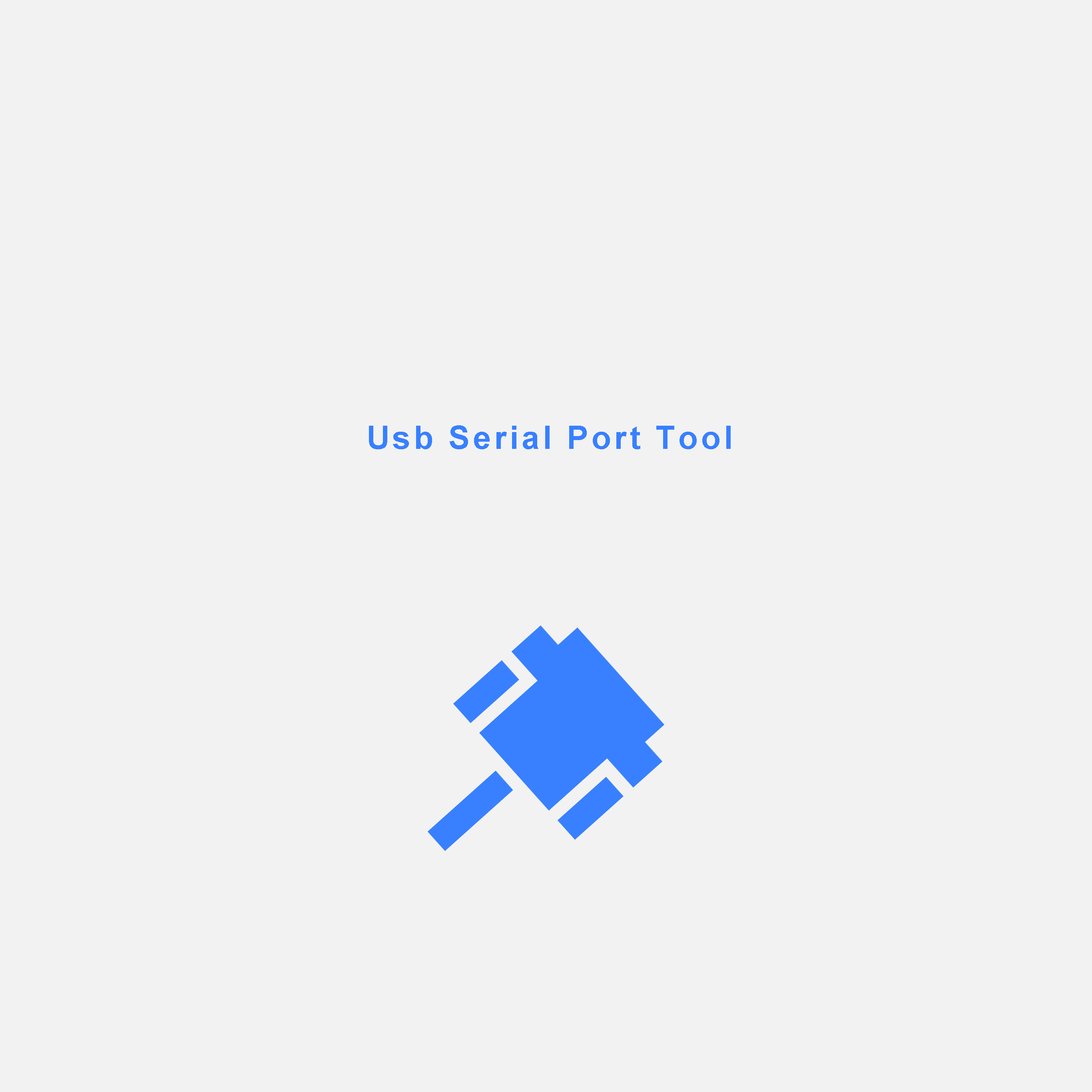
<style>
.page{position:relative;width:1092px;height:1092px;background:#f2f2f2}
.page>*{position:absolute;margin:0}
.t1{font:32px "Arial-BoldMT";letter-spacing:0.1em;color:#3880ff}
</style>
<div class="page">
<p class="t1" style="left:369px;top:425px;width:362px;height:24px">Usb Serial Port Tool</p>
</div>
